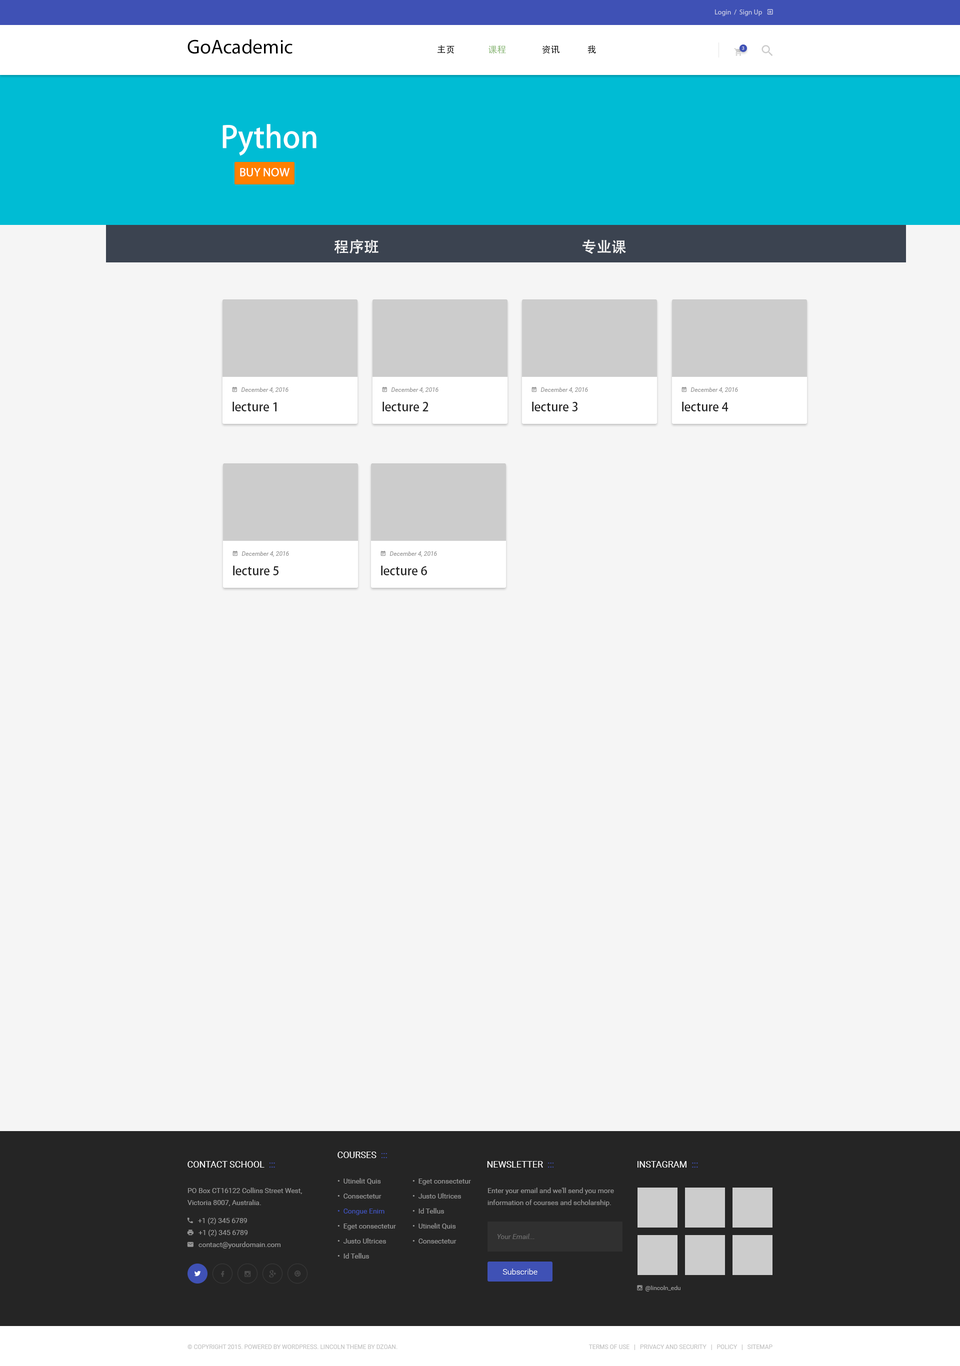
<style>
.page{position:relative;width:960px;height:1366px;background:#f5f5f5}
.page>*{position:absolute;margin:0}
.t1{font:20px "MyriadPro-Regular";color:#000000}
.t2{font:9px "AdobeHeitiStd-Regular";color:#000000}
.t3{font:9px "AdobeHeitiStd-Regular";color:#87b672}
.t4{font:4.5px "Roboto-Regular";text-transform:uppercase}
.t5{font:30px "AdobeHeitiStd-Regular";color:#ffffff}
.t6{font:12px "MyriadPro-Regular";color:#ffffff}
.t7{font:15px "AdobeHeitiStd-Regular";color:#f5f5f5}
.t8{font:12px "AdobeHeitiStd-Regular";color:#252525}
.t9{font:9px "Roboto-Regular";color:#ffffff;text-transform:uppercase}
.t10{font:9px "Roboto-Regular";color:#3f51b5;text-transform:uppercase}
.t11{font:7px/15px "Roboto-Regular";color:#959595}
.t12{font:7px/15px "Roboto-Regular";color:#3f51b5}
.t13{font:7px/12px "Roboto-Regular";color:#959595}
.t14{font:7px "Roboto-Italic";color:#6c6c6c}
.t15{font:8px "Roboto-Light";color:#ffffff}
.t16{font:6px "Roboto-Regular";color:#c2c2c2;text-transform:uppercase}
</style>
<div class="page">
<p class="t1" style="left:188px;top:39px;width:104px;height:15px">GoAcademic</p>
<p class="t2" style="left:438px;top:45px;width:16px;height:9px">主页</p>
<p class="t3" style="left:488px;top:46px;width:18px;height:8px">课程</p>
<p class="t2" style="left:542px;top:45px;width:18px;height:9px">资讯</p>
<p class="t2" style="left:588px;top:45px;width:8px;height:9px">我</p>
<p class="t4" style="left:742px;top:46px;width:2px;height:4px">3</p>
<p class="t5" style="left:222px;top:124px;width:94px;height:32px">Python</p>
<p class="t6" style="left:240px;top:168px;width:50px;height:8px">BUY NOW</p>
<p class="t7" style="left:334px;top:240px;width:44px;height:14px">程序班</p>
<p class="t7" style="left:582px;top:240px;width:44px;height:14px">专业课</p>
<p class="t8" style="left:232px;top:402px;width:44px;height:10px">lecture 1</p>
<p class="t8" style="left:382px;top:402px;width:46px;height:10px">lecture 2</p>
<p class="t8" style="left:532px;top:402px;width:46px;height:10px">lecture 3</p>
<p class="t8" style="left:682px;top:402px;width:46px;height:10px">lecture 4</p>
<p class="t8" style="left:233px;top:566px;width:45px;height:10px">lecture 5</p>
<p class="t8" style="left:381px;top:566px;width:46px;height:10px">lecture 6</p>
<p class="t9" style="left:338px;top:1152px;width:49px;height:6px">Courses  <span class="t10">:::</span></p>
<p class="t9" style="left:188px;top:1162px;width:87px;height:6px">Contact School  <span class="t10">:::</span></p>
<p class="t9" style="left:487px;top:1162px;width:67px;height:6px">Newsletter  <span class="t10">:::</span></p>
<p class="t9" style="left:638px;top:1162px;width:60px;height:6px">Instagram  <span class="t10">:::</span></p>
<p class="t11" style="left:338px;top:1178px;width:58px;height:81px">•  Utinelit Quis<br>•  Consectetur<br><span class="t12">•  Congue Enim<br></span>•  Eget consectetur<br>•  Justo Ultrices<br>•  Id Tellus</p>
<p class="t11" style="left:412px;top:1179px;width:59px;height:65px">•  Eget consectetur<br>•  Justo Ultrices<br>•  Id Tellus<br>•  Utinelit Quis<br>•  Consectetur</p>
<p class="t13" style="left:488px;top:1188px;width:126px;height:19px">Enter your email and we'll send you more information of courses and scholarship.</p>
<p class="t14" style="left:497px;top:1234px;width:37px;height:6px">Your Email...</p>
<p class="t15" style="left:502px;top:1269px;width:36px;height:6px">Subscribe</p>
<p class="t16" style="left:188px;top:1345px;width:210px;height:5px">© Copyright 2015. Powered by WordPress. Lincoln Theme by DZOAN.</p>
<p class="t16" style="left:588px;top:1345px;width:184px;height:5px">Terms of Use   |   Privacy and Security   |   Policy   |   Sitemap</p>
</div>
